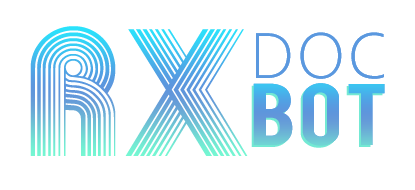
<style>
.page{position:relative;width:415px;height:190px;background:#ffffff}
.page>*{position:absolute;margin:0}
.t1{font:166.7px "Akka";letter-spacing:0.015em}
.t2{font:68.5px/67px "CorbelLight";letter-spacing:0.015em;color:#5aa4df;text-transform:uppercase}
.t3{font:68.5px/67px "Bebas";letter-spacing:0.015em;color:#5aa4df;scale:1.24 1}
</style>
<div class="page">
<p class="t1" style="left:30px;top:26px;width:218px;height:130px">Rx</p>
<p class="t2" style="left:253px;top:32px;width:132px;height:114px;text-align:center">Doc<br><span class="t3">BOT</span></p>
</div>
